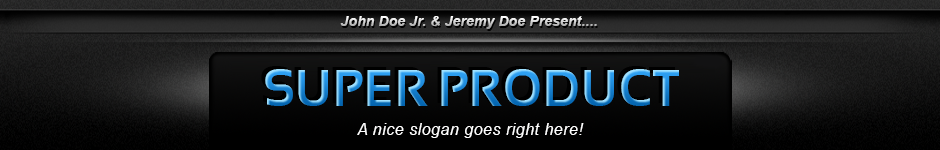
<style>
.page{position:relative;width:940px;height:150px}
.page>*{position:absolute;margin:0}
.t1{font:13.6px "Arial-BoldItalicMT";letter-spacing:0.025em}
.t2{font:52px "Sansation-Bold";letter-spacing:0.025em;scale:0.94 1}
.t3{font:16.2px "Arial-ItalicMT";letter-spacing:0.025em;color:#ffffff}
</style>
<div class="page">
<p class="t1" style="left:340px;top:16px;width:257px;height:13px">John Doe Jr. &amp; Jeremy Doe Present....</p>
<p class="t2" style="left:265px;top:69px;width:414px;height:37px">SUPER PRODUCT</p>
<p class="t3" style="left:357px;top:123px;width:227px;height:15px">A nice slogan goes right here!</p>
</div>
